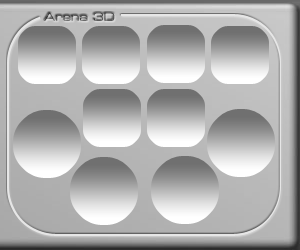
<style>
.page{position:relative;width:300px;height:250px}
.page>*{position:absolute;margin:0}
.t1{font:14px "MetrostyleExtended-Regular";color:#525252}
</style>
<div class="page">
<p class="t1" style="left:44px;top:12px;width:71px;height:9px">Arena 3D</p>
</div>
